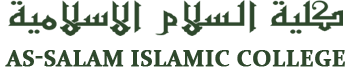
<style>
.page{position:relative;width:350px;height:70px;background:#ffffff}
.page>*{position:absolute;margin:0}
.t1{font:23px "Constantia-Bold";color:#2e482c;text-transform:uppercase;font-weight:bold}
</style>
<div class="page">
<p class="t1" style="left:5px;top:50px;width:340px;height:17px">As-Salam Islamic College</p>
</div>
